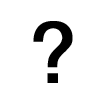
<style>
.page{position:relative;width:105px;height:105px;background:#ffffff}
.page>*{position:absolute;margin:0}
.t1{font:84px "Helvetica";color:#000000;font-weight:bold}
</style>
<div class="page">
<p class="t1" style="left:33px;top:21px;width:40px;height:62px">?</p>
</div>
